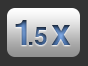
<style>
.page{position:relative;width:88px;height:66px;background:#333333}
.page>*{position:absolute;margin:0}
.t1{font:36px "Helvetica-Bold"}
.t2{font:24px "Helvetica-Bold"}
</style>
<div class="page">
<p class="t1" style="left:15px;top:20px;width:12px;height:25px">1</p>
<p class="t2" style="left:29px;top:27px;width:18px;height:18px">.5</p>
<p class="t1" style="left:51px;top:25px;width:20px;height:20px">x</p>
</div>
